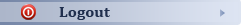
<style>
.page{position:relative;width:241px;height:25px}
.page>*{position:absolute;margin:0}
.t1{font:16px "Cambria-Bold";color:#202f4e}
</style>
<div class="page">
<p class="t1" style="left:59px;top:7px;width:51px;height:13px">Logout</p>
</div>
